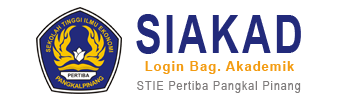
<style>
.page{position:relative;width:350px;height:100px;background:#ffffff}
.page>*{position:absolute;margin:0}
.t1{font:53px "Arial-BoldMT";letter-spacing:0.075em;color:#222a7b;scale:0.75 1}
.t2{font:13px "Arial-BoldMT";letter-spacing:0.075em;color:#f39c12}
.t3{font:13px "ArialNarrow";letter-spacing:0.075em;color:#7f7c7c}
</style>
<div class="page">
<p class="t1" style="left:136px;top:14px;width:165px;height:40px">SIAKAD</p>
<p class="t2" style="left:145px;top:61px;width:149px;height:13px">Login Bag. Akademik</p>
<p class="t3" style="left:137px;top:81px;width:164px;height:12px">STIE Pertiba Pangkal Pinang</p>
</div>
